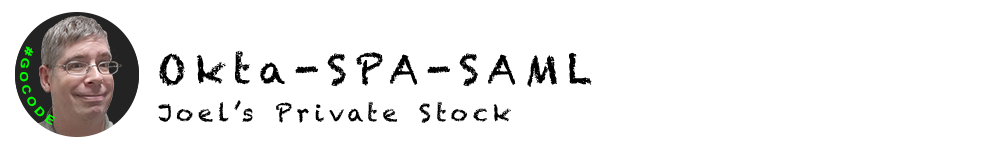
<style>
.page{position:relative;width:1000px;height:150px;background:#ffffff}
.page>*{position:absolute;margin:0}
.t1{font:11.2px "Arial-BoldMT";letter-spacing:0.2em;color:#00ff00}
.t2{font:40px "Chalkduster";letter-spacing:0.2em;color:#000000}
.t3{font:24px "Chalkduster";letter-spacing:0.2em;color:#000000}
</style>
<div class="page">
<p class="t1" style="left:19px;top:46px;width:37px;height:80px;rotate:72deg">#GOCODE</p>
<p class="t2" style="left:159px;top:50px;width:433px;height:37px">Okta-SPA-SAML</p>
<p class="t3" style="left:158px;top:100px;width:353px;height:23px">Joel’s Private Stock</p>
</div>
